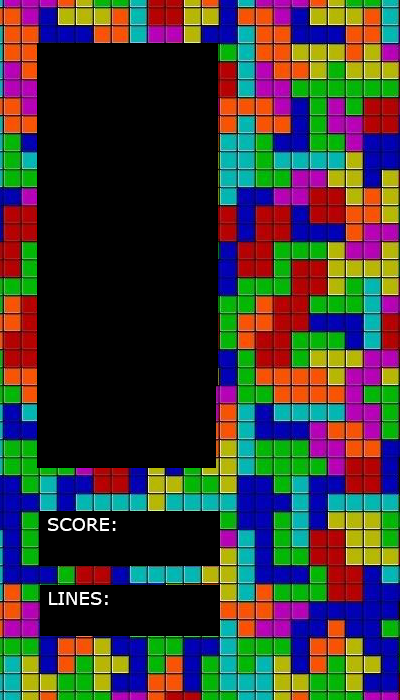
<style>
.page{position:relative;width:400px;height:700px;background:#000000}
.page>*{position:absolute;margin:0}
.t1{font:18px "Verdana";color:#ffffff}
</style>
<div class="page">
<p class="t1" style="left:48px;top:518px;width:68px;height:13px">SCORE:</p>
<p class="t1" style="left:49px;top:592px;width:59px;height:13px">LINES:</p>
</div>
